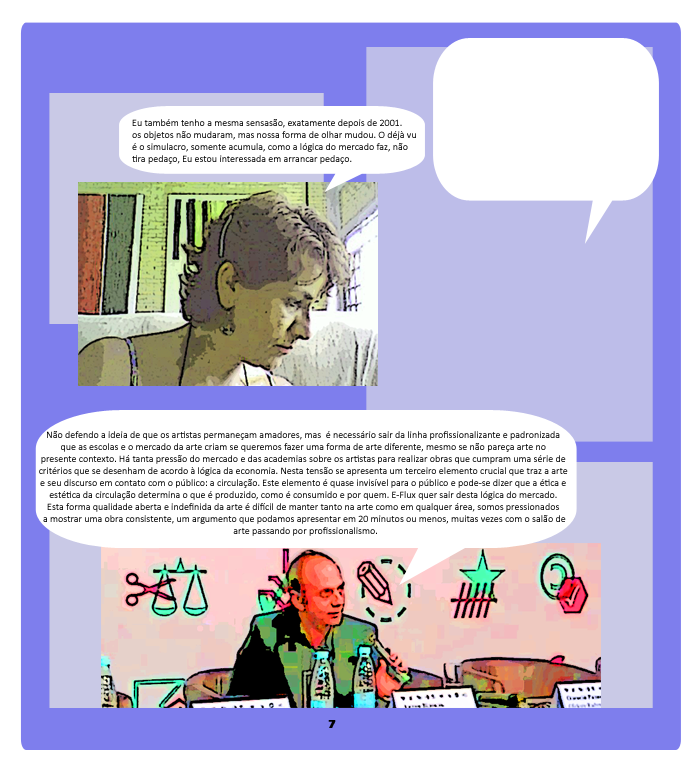
<style>
.page{position:relative;width:700px;height:768px;background:#ffffff}
.page>*{position:absolute;margin:0}
.t1{font:10px "Calibri"}
.t2{font:10px "Calibri";color:#000000}
.t3{font:12px "ErasITC-Bold";color:#000000}
</style>
<div class="page">
<p class="t1" style="left:132px;top:119px;width:284px;height:45px">Eu também tenho a mesma sensasão, exatamente depois de 2001.<br>os objetos não mudaram, mas nossa forma de olhar mudou. O déjà vu <br>é o simulacro, somente acumula, como a lógica do mercado faz, não <br>tira pedaço, Eu estou interessada em arrancar pedaço.</p>
<p class="t2" style="left:39px;top:431px;width:529px;height:105px;text-align:center">Não defendo a ideia de que os artistas permaneçam amadores, mas  é necessário sair da linha profissionalizante e padronizada <br>que as escolas e o mercado da arte criam se queremos fazer uma forma de arte diferente, mesmo se não pareça arte no <br>presente contexto. Há tanta pressão do mercado e das academias sobre os artistas para realizar obras que cumpram uma série de <br>critérios que se desenham de acordo à lógica da economia. Nesta tensão se apresenta um terceiro elemento crucial que traz a arte <br>e seu discurso em contato com o público: a circulação. Este elemento é quase invisível para o público e pode-se dizer que a ética e <br>estética da circulação determina o que é produzido, como é consumido e por quem. E-Flux quer sair desta lógica do mercado. <br>Esta forma qualidade aberta e indefinida da arte é difícil de manter tanto na arte como em qualquer área, somos pressionados <br>a mostrar uma obra consistente, um argumento que podamos apresentar em 20 minutos ou menos, muitas vezes com o salão de<br> arte passando por profissionalismo.</p>
<p class="t3" style="left:328px;top:720px;width:8px;height:8px">7</p>
</div>
